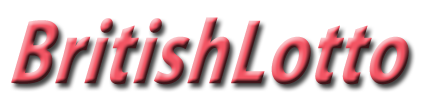
<style>
.page{position:relative;width:425px;height:100px;background:#ffffff}
.page>*{position:absolute;margin:0}
.t1{font:92px "MyriadPro-BoldIt";font-weight:bold;font-style:italic;scale:0.79 1}
</style>
<div class="page">
<p class="t1" style="left:11px;top:17px;width:398px;height:68px">BritishLotto</p>
</div>
